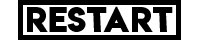
<style>
.page{position:relative;width:200px;height:40px;background:#000000}
.page>*{position:absolute;margin:0}
.t1{font:31.8px "LemonMilkbold";color:#000000}
</style>
<div class="page">
<p class="t1" style="left:27px;top:6px;width:146px;height:26px">reStart</p>
</div>
